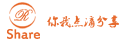
<style>
.page{position:relative;width:127px;height:42px;background:#ffffff}
.page>*{position:absolute;margin:0}
.t1{font:11.5px "2.0-";color:#e7692c;scale:1.06 1}
</style>
<div class="page">
<p class="t1" style="left:47px;top:15px;width:72px;height:13px">你我点滴分享</p>
</div>
